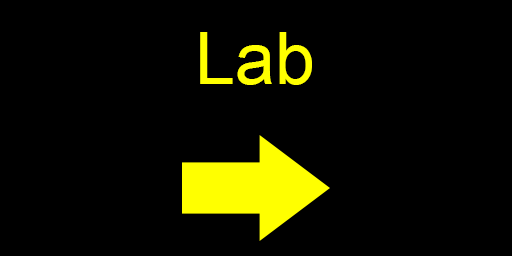
<style>
.page{position:relative;width:512px;height:256px;background:#000000}
.page>*{position:absolute;margin:0}
.t1{font:72px "ArialMT";color:#ffff00}
</style>
<div class="page">
<p class="t1" style="left:200px;top:32px;width:112px;height:53px">Lab</p>
</div>
